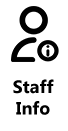
<style>
.page{position:relative;width:68px;height:131px;background:#ffffff}
.page>*{position:absolute;margin:0}
.t1{font:18px "MicrosoftTaiLe-Bold";color:#000000}
</style>
<div class="page">
<p class="t1" style="left:13px;top:79px;width:41px;height:36px;text-align:center">Staff<br>Info</p>
</div>
